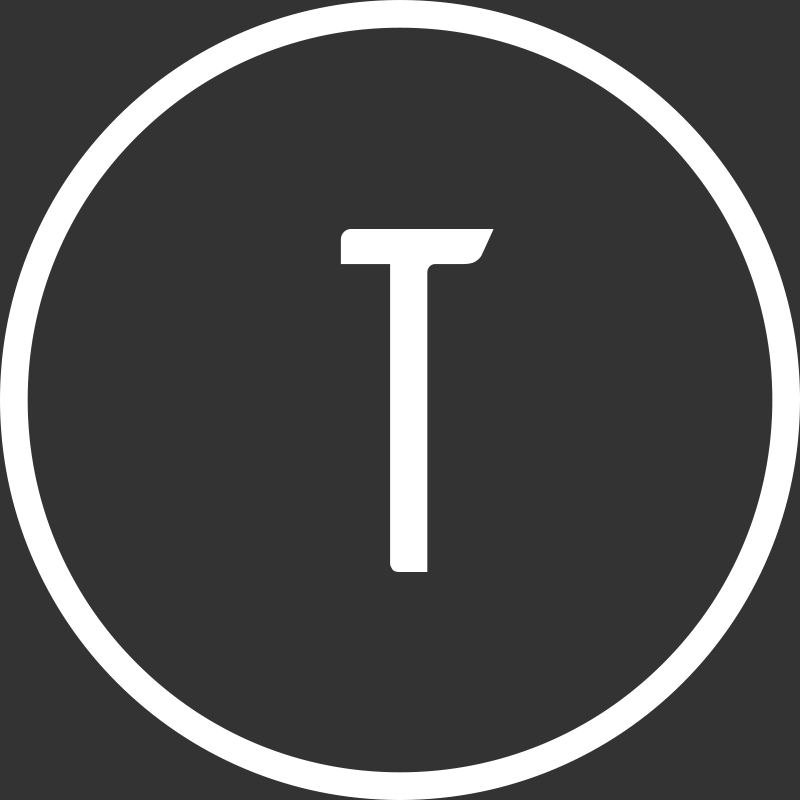
<style>
.page{position:relative;width:800px;height:800px;background:#333333}
.page>*{position:absolute;margin:0}
.t1{font:502px "Ailerons";color:#ffffff}
</style>
<div class="page">
<p class="t1" style="left:340px;top:229px;width:154px;height:343px">t</p>
</div>
